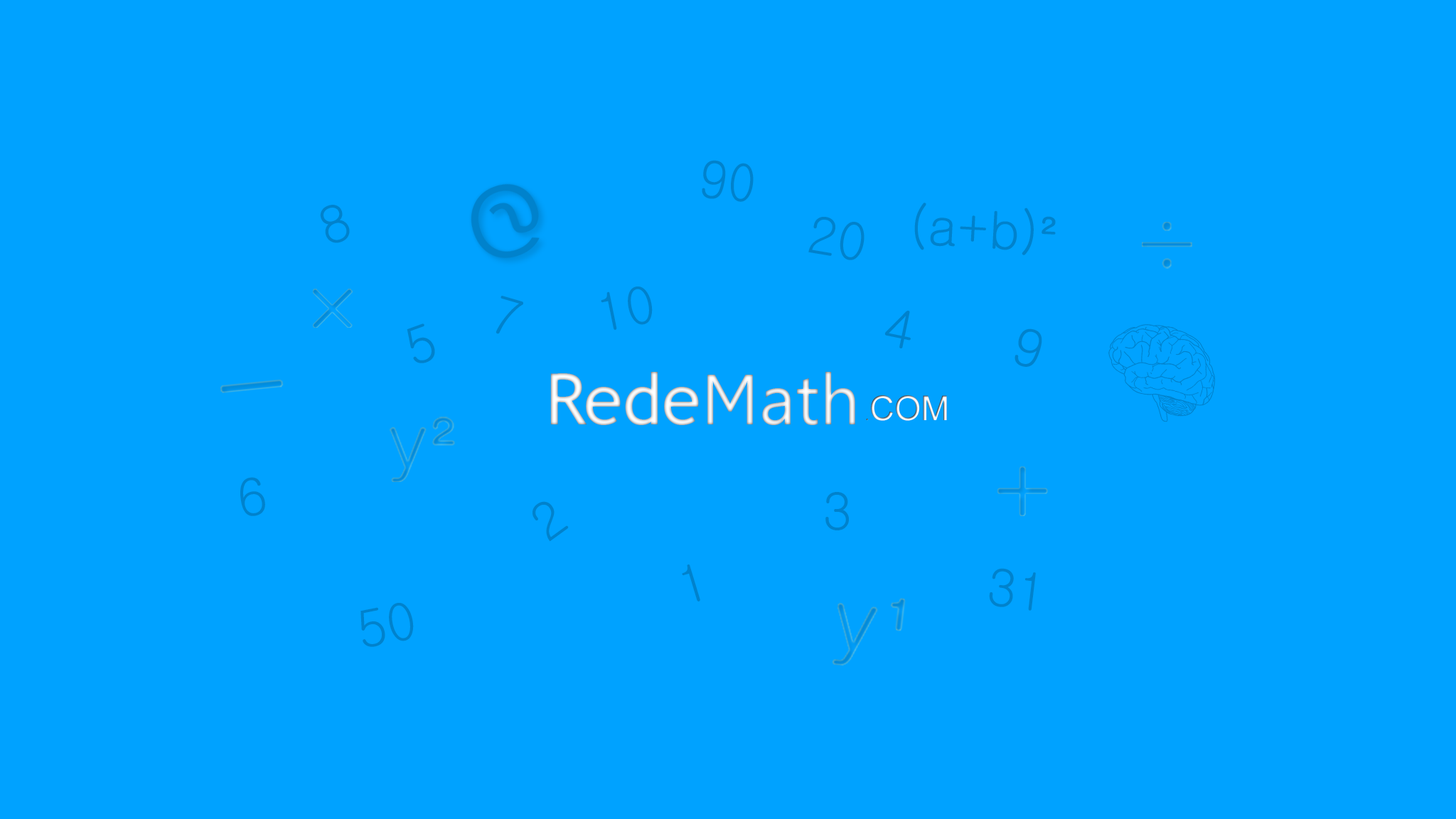
<style>
.page{position:relative;width:1456px;height:819px;background:#00a2ff}
.page>*{position:absolute;margin:0}
.t1{font:51.2px "Gulim";color:#0082cc;scale:0.96 1}
.t2{font:51.2px "Gulim";color:#0082cc}
.t3{font:71.1px "TrebuchetMS"}
.t4{font:71.1px "Leelawadee"}
.t5{font:34.1px "ArialMT"}
.t6{font:16.4px "ArialMT"}
</style>
<div class="page">
<p class="t1" style="left:702px;top:160px;width:52px;height:42px;rotate:7deg">90</p>
<p class="t2" style="left:320px;top:205px;width:30px;height:38px;rotate:-20deg">8</p>
<p class="t2" style="left:914px;top:203px;width:142px;height:52px;rotate:3deg">(a+b)²</p>
<p class="t2" style="left:808px;top:217px;width:56px;height:43px;rotate:9deg">20</p>
<p class="t2" style="left:601px;top:287px;width:52px;height:43px;rotate:-11deg">10</p>
<p class="t2" style="left:496px;top:296px;width:27px;height:38px;rotate:16deg">7</p>
<p class="t2" style="left:884px;top:311px;width:27px;height:37px;rotate:12deg">4</p>
<p class="t2" style="left:407px;top:323px;width:28px;height:40px;rotate:-20deg">5</p>
<p class="t2" style="left:1014px;top:328px;width:28px;height:39px;rotate:15deg">9</p>
<p class="t3" style="left:550px;top:372px;width:305px;height:53px">Rede<span class="t4">Math</span></p>
<p class="t5" style="left:866px;top:395px;width:81px;height:26px"><span class="t6">.</span>COM</p>
<p class="t2" style="left:240px;top:477px;width:25px;height:39px;rotate:-11deg">6</p>
<p class="t2" style="left:825px;top:492px;width:24px;height:38px">3</p>
<p class="t2" style="left:532px;top:501px;width:37px;height:41px;rotate:-36deg">2</p>
<p class="t2" style="left:682px;top:564px;width:18px;height:37px;rotate:-17deg">1</p>
<p class="t2" style="left:989px;top:568px;width:47px;height:43px;rotate:7deg">31</p>
<p class="t2" style="left:360px;top:603px;width:54px;height:44px;rotate:-11deg">50</p>
</div>
